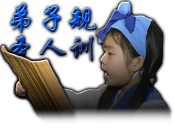
<style>
.page{position:relative;width:174px;height:140px;background:#ffffff}
.page>*{position:absolute;margin:0}
.t1{font:31px/30px "STXingkai"}
</style>
<div class="page">
<p class="t1" style="left:9px;top:3px;width:88px;height:60px">弟子规<br>圣人训</p>
</div>
